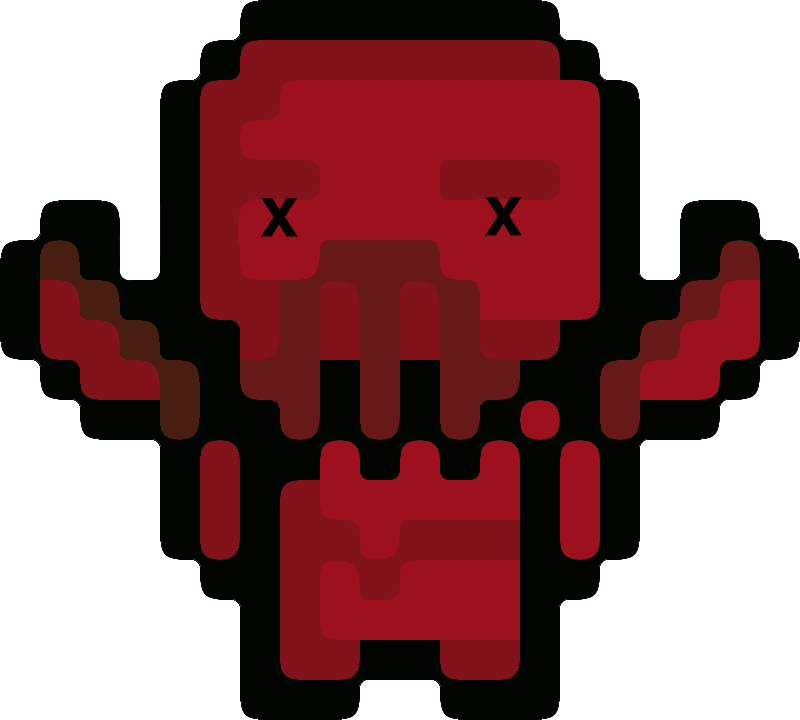
<style>
.page{position:relative;width:800px;height:720px;background:#ffffff}
.page>*{position:absolute;margin:0}
.t1{font:52.8px "Tahoma-Bold";color:#000000}
</style>
<div class="page">
<p class="t1" style="left:261px;top:198px;width:37px;height:39px">X</p>
<p class="t1" style="left:485px;top:197px;width:37px;height:39px">X</p>
</div>
